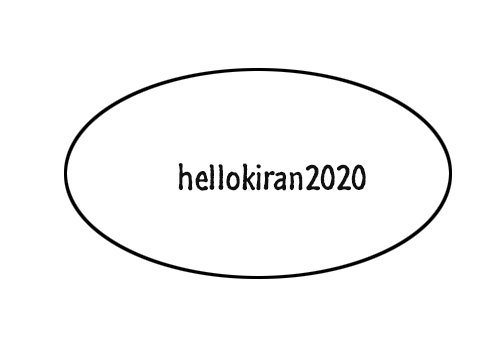
<style>
.page{position:relative;width:504px;height:360px;background:#ffffff}
.page>*{position:absolute;margin:0}
.t1{font:36px "SegoeMarker";color:#101010}
</style>
<div class="page">
<p class="t1" style="left:178px;top:163px;width:188px;height:28px">hellokiran2020</p>
</div>
